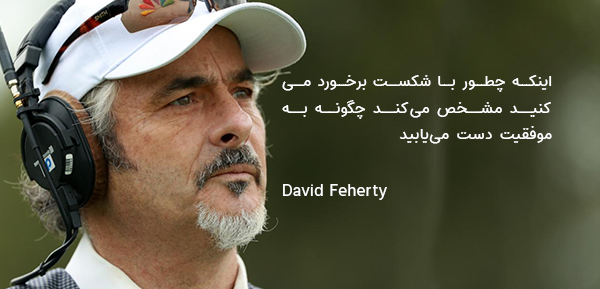
<style>
.page{position:relative;width:600px;height:289px}
.page>*{position:absolute;margin:0}
.t1{font:16.3px/26.3px "Estedad-Medium";letter-spacing:0.02em;color:#ffffff}
.t2{font:16.3px "Estedad-Medium";letter-spacing:0.02em;color:#ffffff}
</style>
<div class="page">
<p class="t1" style="left:282px;top:75px;width:270px;height:69px;text-align:justify">اینکه چطور با شکست برخورد می‌کنید مشخص می‌کند چگونه به موفقیت دست می‌یابید</p>
<p class="t2" style="left:283px;top:184px;width:104px;height:16px">David Feherty</p>
</div>
